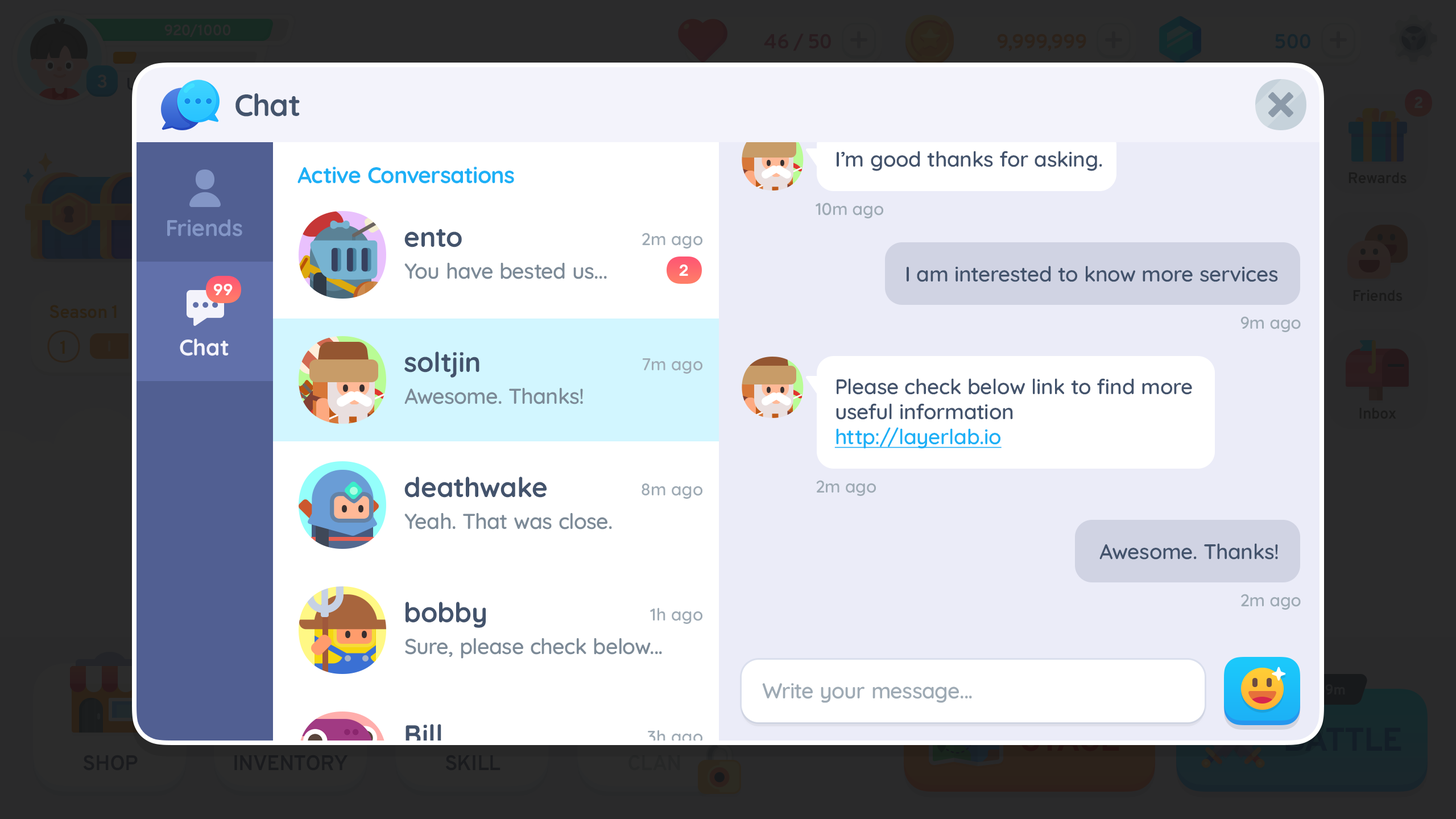
<style>
.page{position:relative;width:1456px;height:819px;background:#ffffff}
.page>*{position:absolute;margin:0}
.t1{font:30.7px "Quicksand-Bold";color:#43536c}
.t2{font:21px "Quicksand-SemiBold";color:#43536c}
.t3{font:22.7px "Quicksand-Bold";color:#1cb0f6}
.t4{font:17.1px "Quicksand-SemiBold";color:#9eaab4}
.t5{font:22.7px "Quicksand-Bold";letter-spacing:0.01em;color:#8396c6}
.t6{font:27.3px "Quicksand-Bold";color:#43536c}
.t7{font:21.6px "Quicksand-SemiBold";color:#7c8a97}
.t8{font:15.9px "Rubik-Medium";color:#ffffff;text-transform:uppercase}
.t9{font:22.7px "Quicksand-Bold";letter-spacing:0.01em;color:#f3f3fb}
.t10{font:21px/25px "Quicksand-SemiBold";color:#43536c}
.t11{font:21px/25px "Quicksand-SemiBold";color:#1cb0f6;text-decoration:underline}
.t12{font:21.6px "Quicksand-SemiBold";color:#9eaab4}
</style>
<div class="page">
<p class="t1" style="left:235px;top:93px;width:65px;height:24px">Chat</p>
<p class="t2" style="left:837px;top:151px;width:265px;height:20px">I’m good thanks for asking.</p>
<p class="t3" style="left:297px;top:167px;width:217px;height:17px">Active Conversations</p>
<p class="t4" style="left:816px;top:202px;width:67px;height:16px">10m ago</p>
<p class="t5" style="left:167px;top:219px;width:75px;height:18px">Friends</p>
<p class="t6" style="left:404px;top:229px;width:58px;height:18px">ento</p>
<p class="t4" style="left:642px;top:233px;width:60px;height:16px">2m ago</p>
<p class="t7" style="left:404px;top:263px;width:203px;height:16px">You have bested us...</p>
<p class="t8" style="left:679px;top:264px;width:9px;height:12px">2</p>
<p class="t2" style="left:907px;top:266px;width:371px;height:16px">I am interested to know more services</p>
<p class="t8" style="left:214px;top:284px;width:19px;height:11px">99</p>
<p class="t4" style="left:1240px;top:316px;width:61px;height:16px">9m ago</p>
<p class="t9" style="left:180px;top:338px;width:49px;height:18px">Chat</p>
<p class="t6" style="left:404px;top:351px;width:75px;height:27px">soltjin</p>
<p class="t4" style="left:642px;top:358px;width:60px;height:16px">7m ago</p>
<p class="t7" style="left:404px;top:388px;width:179px;height:16px">Awesome. Thanks!</p>
<p class="t10" style="left:834px;top:378px;width:358px;height:71px">Please check below link to find more<br>useful information<br><span class="t11">http://layerlab.io</span></p>
<p class="t6" style="left:404px;top:477px;width:143px;height:21px">deathwake</p>
<p class="t4" style="left:642px;top:483px;width:60px;height:16px">8m ago</p>
<p class="t4" style="left:816px;top:480px;width:60px;height:16px">2m ago</p>
<p class="t7" style="left:404px;top:513px;width:208px;height:16px">Yeah. That was close.</p>
<p class="t2" style="left:1099px;top:543px;width:179px;height:17px">Awesome. Thanks!</p>
<p class="t4" style="left:1241px;top:594px;width:60px;height:16px">2m ago</p>
<p class="t6" style="left:406px;top:602px;width:80px;height:26px">bobby</p>
<p class="t4" style="left:650px;top:607px;width:52px;height:17px">1h ago</p>
<p class="t7" style="left:405px;top:638px;width:257px;height:21px">Sure, please check below...</p>
<p class="t12" style="left:762px;top:683px;width:210px;height:20px">Write your message...</p>
<p class="t6" style="left:406px;top:724px;width:35px;height:20px">Bill</p>
</div>
